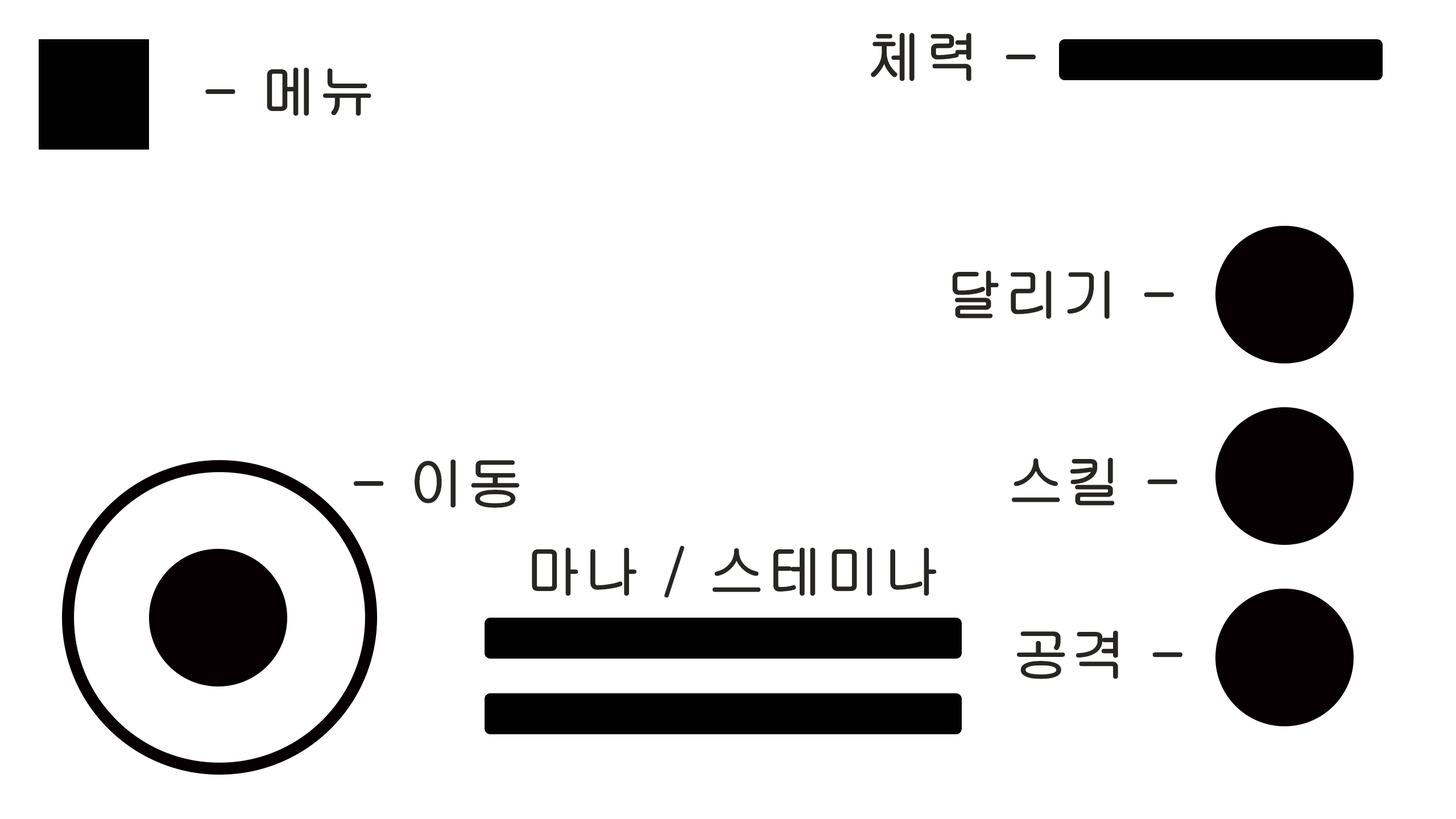
<style>
.page{position:relative;width:1456px;height:819px;background:#ffffff}
.page>*{position:absolute;margin:0}
.t1{font:56.9px "Gulim";color:#282623;font-weight:bold}
</style>
<div class="page">
<p class="t1" style="left:871px;top:32px;width:165px;height:49px">체력 -</p>
<p class="t1" style="left:205px;top:67px;width:166px;height:49px">- 메뉴</p>
<p class="t1" style="left:952px;top:270px;width:222px;height:49px">달리기 -</p>
<p class="t1" style="left:354px;top:459px;width:165px;height:49px">- 이동</p>
<p class="t1" style="left:1012px;top:457px;width:165px;height:49px">스킬 -</p>
<p class="t1" style="left:532px;top:545px;width:405px;height:53px">마나 / 스테미나</p>
<p class="t1" style="left:1017px;top:630px;width:165px;height:49px">공격 -</p>
</div>
